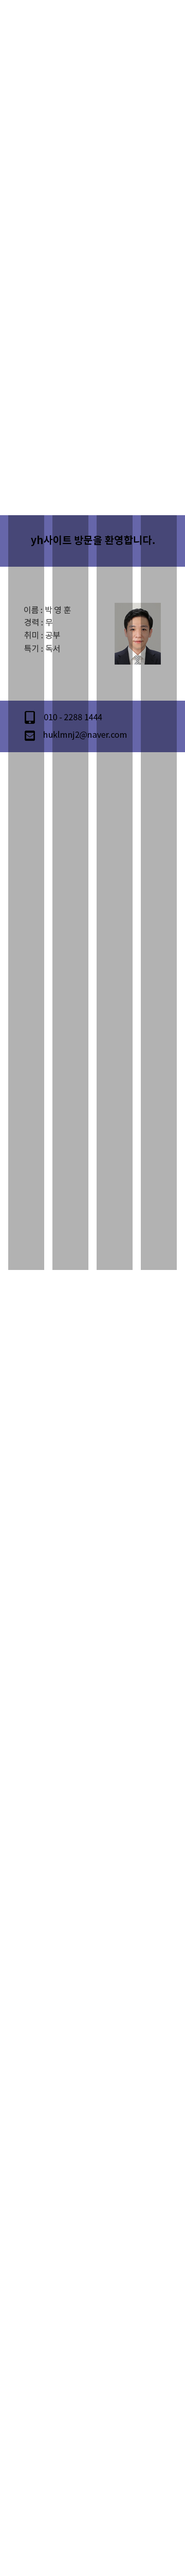
<style>
.page{position:relative;width:185px;height:2576px;background:#ffffff}
.page>*{position:absolute;margin:0}
.t1{font:10.3px "NotoSansKR-Bold";color:#000000}
.t2{font:8.2px "NotoSansKR-Regular";color:#444444}
.t3{font:8.2px "NotoSansKR-Regular";color:#000000}
</style>
<div class="page">
<p class="t1" style="left:31px;top:535px;width:124px;height:11px">yh사이트 방문을 환영합니다.</p>
<p class="t2" style="left:24px;top:606px;width:47px;height:8px">이름 : 박 영 훈</p>
<p class="t2" style="left:24px;top:618px;width:29px;height:8px">경력 : 무</p>
<p class="t2" style="left:24px;top:631px;width:36px;height:8px">취미 : 공부</p>
<p class="t2" style="left:24px;top:645px;width:36px;height:8px">특기 : 독서</p>
<p class="t3" style="left:44px;top:714px;width:59px;height:6px">010 - 2288 1444</p>
<p class="t3" style="left:44px;top:731px;width:83px;height:9px">huklmnj2@naver.com</p>
</div>
